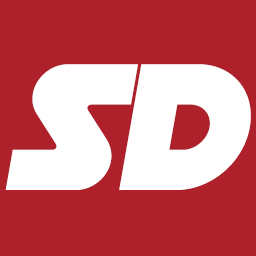
<style>
.page{position:relative;width:256px;height:256px;background:#ae212a}
.page>*{position:absolute;margin:0}
.t1{font:173.1px "RestoreBl-Regular";color:#ffffff;font-style:italic}
</style>
<div class="page">
<p class="t1" style="left:5px;top:64px;width:246px;height:126px">sd</p>
</div>
